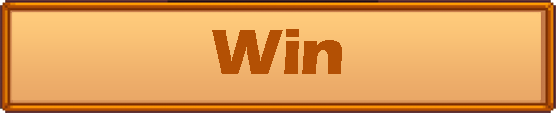
<style>
.page{position:relative;width:556px;height:113px}
.page>*{position:absolute;margin:0}
.t1{font:65.9px "ErasITC-Bold";letter-spacing:-0.03em;color:#b35004}
</style>
<div class="page">
<p class="t1" style="left:212px;top:29px;width:130px;height:45px">Win</p>
</div>
